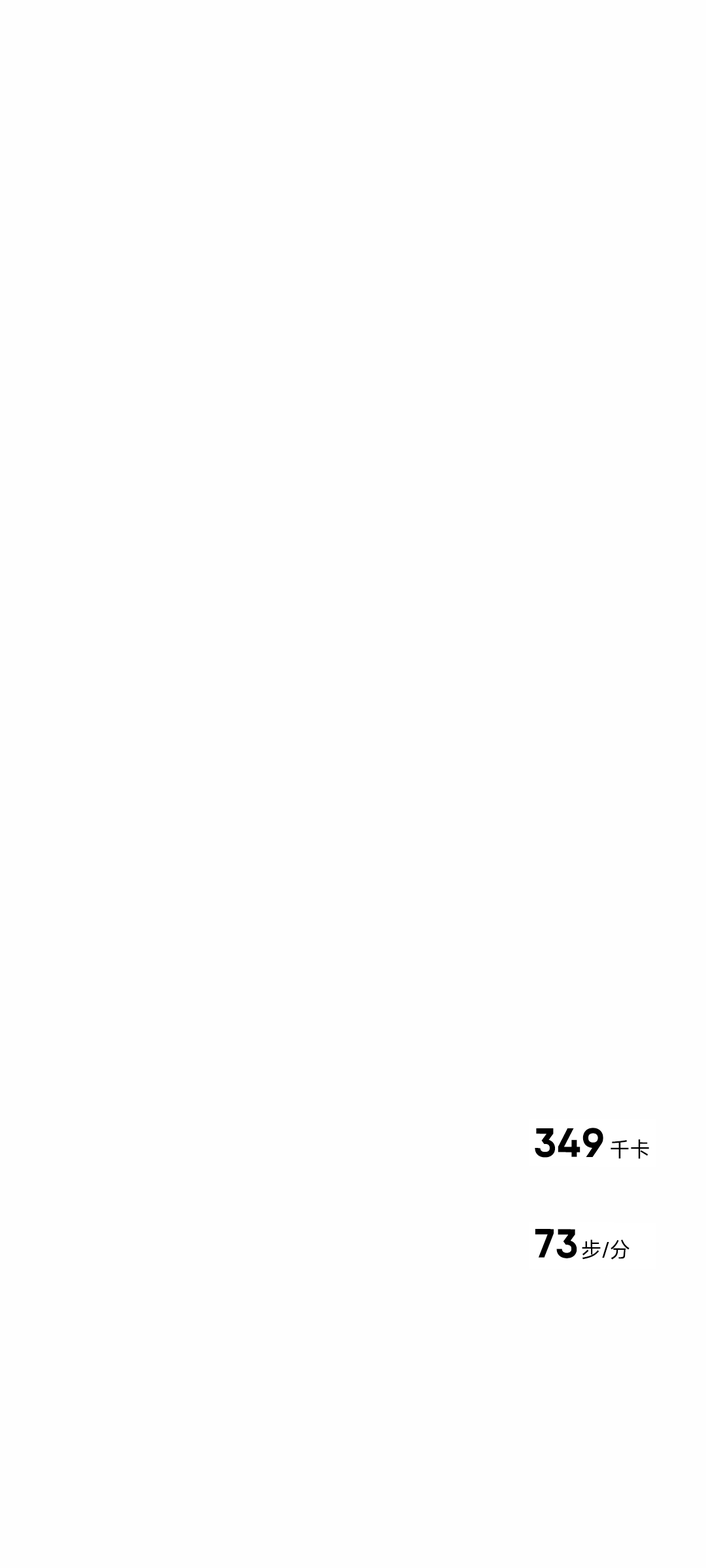
<style>
.page{position:relative;width:706px;height:1568px;background:#fefefe}
.page>*{position:absolute;margin:0}
.t1{font:40.5px "KeepSans-Bold";letter-spacing:0.02em;color:#000000}
.t2{font:20.9px "MiSans-Normal";color:#000000}
.t3{font:21.2px "MiSans-Normal";color:#000000}
</style>
<div class="page">
<p class="t1" style="left:534px;top:1128px;width:69px;height:30px">349</p>
<p class="t2" style="left:610px;top:1139px;width:39px;height:20px">千卡</p>
<p class="t1" style="left:534px;top:1229px;width:43px;height:29px">73</p>
<p class="t3" style="left:581px;top:1239px;width:48px;height:21px">步/分</p>
</div>
